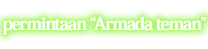
<style>
.page{position:relative;width:208px;height:49px;background:#ffffff}
.page>*{position:absolute;margin:0}
.t1{font:18px "HeiseiMinStd-W7";letter-spacing:-0.08em;color:#ffffff;font-weight:bold}
</style>
<div class="page">
<p class="t1" style="left:2px;top:16px;width:205px;height:19px">permintaan “Armada teman”</p>
</div>
